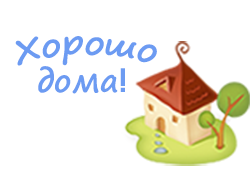
<style>
.page{position:relative;width:250px;height:170px;background:#ffffff}
.page>*{position:absolute;margin:0}
.t1{font:32px "SegoePrint-Bold";color:#6c9bf2}
.t2{font:32px "AvantGardeCTT-Bold";color:#6c9bf2}
</style>
<div class="page">
<p class="t1" style="left:15px;top:36px;width:142px;height:30px">Хорошо</p>
<p class="t1" style="left:38px;top:66px;width:87px;height:28px">дома<span class="t2">!</span></p>
</div>
